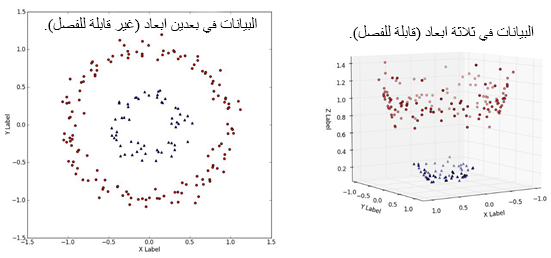
<style>
.page{position:relative;width:551px;height:258px;background:#ffffff}
.page>*{position:absolute;margin:0}
.t1{font:12px "TimesNewRomanPSMT";color:#000000}
.t2{font:12px "TimesNewRomanPSMT";color:#ffffff}
</style>
<div class="page">
<p class="t1" style="left:30px;top:17px;width:227px;height:16px">البيانات في بعدين ابعاد (غير قابلة للفصل).<span class="t2">س</span></p>
<p class="t1" style="left:335px;top:25px;width:199px;height:16px">البيانات في ثلاثة ابعاد (قابلة للفصل).<span class="t2">س</span></p>
</div>
